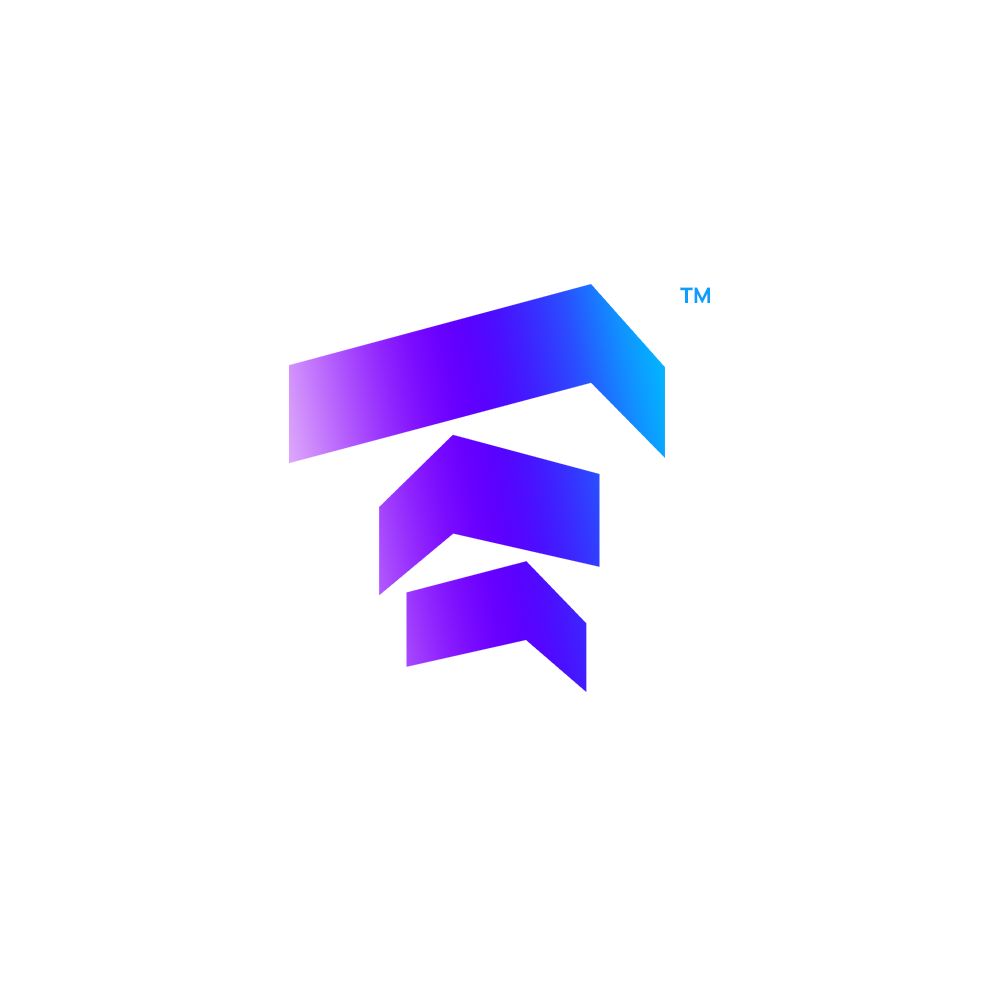
<style>
.page{position:relative;width:1000px;height:1000px;background:#ffffff}
.page>*{position:absolute;margin:0}
.t1{font:21.4px "Manrope-ExtraBold";letter-spacing:-0.01em;color:#0c9eff}
</style>
<div class="page">
<p class="t1" style="left:680px;top:287px;width:30px;height:16px">TM</p>
</div>
